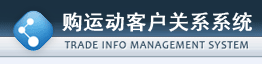
<style>
.page{position:relative;width:262px;height:64px}
.page>*{position:absolute;margin:0}
.t1{font:20.7px "SimHei";color:#ffffff;font-weight:bold}
</style>
<div class="page">
<p class="t1" style="left:62px;top:12px;width:190px;height:20px">购运动客户关系系统</p>
</div>
